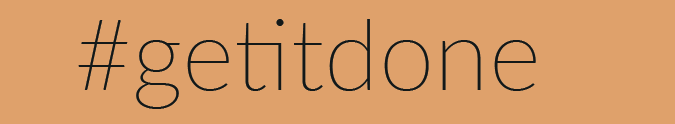
<style>
.page{position:relative;width:675px;height:124px;background:#dfa16b}
.page>*{position:absolute;margin:0}
.t1{font:100px "Lato-Thin";color:#141819}
</style>
<div class="page">
<p class="t1" style="left:78px;top:19px;width:458px;height:90px">#getitdone</p>
</div>
